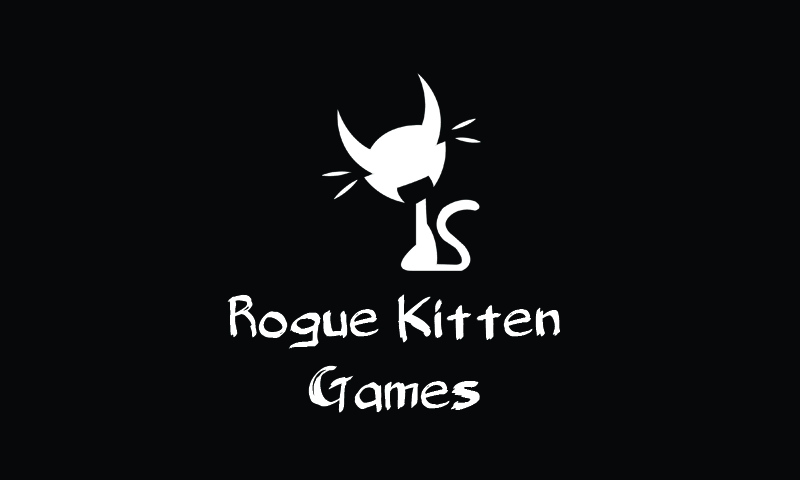
<style>
.page{position:relative;width:800px;height:480px;background:#070809}
.page>*{position:absolute;margin:0}
.t1{font:60px "BelligerentMadness";color:#ffffff}
</style>
<div class="page">
<p class="t1" style="left:227px;top:294px;width:333px;height:119px;text-align:center">Rogue Kitten<br>Games</p>
</div>
